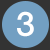
<style>
.page{position:relative;width:50px;height:50px;background:#729fc2}
.page>*{position:absolute;margin:0}
.t1{font:33.7px "HelveticaNeue-Medium";color:#ffffff}
</style>
<div class="page">
<p class="t1" style="left:17px;top:11px;width:17px;height:26px">3</p>
</div>
